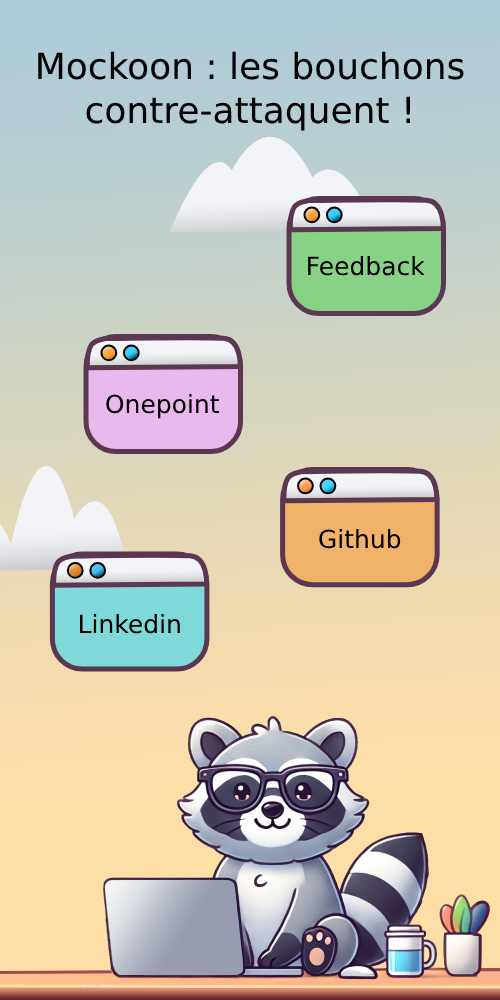
<style>
.page{position:relative;width:500px;height:1000px}
.page>*{position:absolute;margin:0}
.t1{font:36px "DejaVuSans";color:#000000}
.t2{font:25px "DejaVuSans";color:#000000}
</style>
<div class="page">
<p class="t1" style="left:38px;top:51px;width:426px;height:80px;text-align:center">Mockoon : les bouchons contre-attaquent !</p>
<p class="t2" style="left:308px;top:256px;width:117px;height:20px">Feedback</p>
<p class="t2" style="left:106px;top:394px;width:113px;height:25px">Onepoint</p>
<p class="t2" style="left:319px;top:529px;width:82px;height:20px">Github</p>
<p class="t2" style="left:80px;top:614px;width:100px;height:20px">Linkedin</p>
</div>
